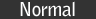
<style>
.page{position:relative;width:96px;height:19px;background:#333333}
.page>*{position:absolute;margin:0}
.t1{font:19px "BellGothicStd-Bold";letter-spacing:-0.025em;color:#ffffff}
</style>
<div class="page">
<p class="t1" style="left:20px;top:1px;width:55px;height:16px">Normal</p>
</div>
